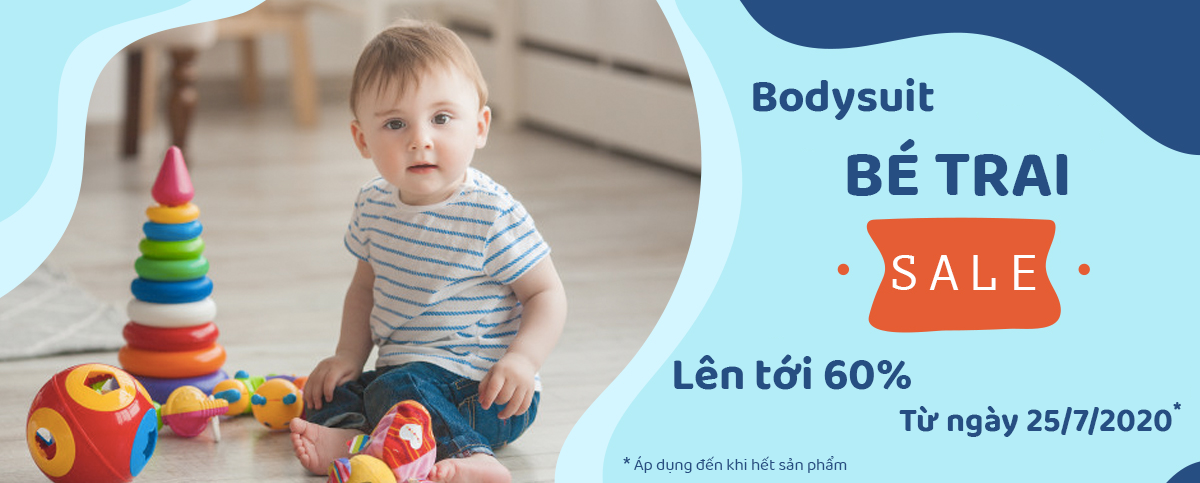
<style>
.page{position:relative;width:1200px;height:483px;background:#b4edf8}
.page>*{position:absolute;margin:0}
.t1{font:45.8px "BalooTammudu2-Bold";color:#264e82}
.t2{font:66.7px "BalooTammudu2-Bold";color:#264e82}
.t3{font:33.3px "BalooTammudu2-Bold";color:#264e82}
.t4{font:25px "BalooTammudu2-Bold";color:#264e82}
.t5{font:25px "BalooTammudu2-Regular";color:#264e82}
.t6{font:16.7px "BalooTammudu2-Regular";color:#264e82}
</style>
<div class="page">
<p class="t1" style="left:753px;top:78px;width:181px;height:42px">Bodysuit</p>
<p class="t2" style="left:847px;top:139px;width:221px;height:57px">BÉ TRAI</p>
<p class="t1" style="left:674px;top:354px;width:237px;height:36px">Lên tới 60%</p>
<p class="t3" style="left:899px;top:406px;width:273px;height:31px">Từ ngày 25/7/2020</p>
<p class="t4" style="left:1173px;top:402px;width:8px;height:8px">*</p>
<p class="t5" style="left:623px;top:457px;width:7px;height:7px">*</p>
<p class="t6" style="left:634px;top:456px;width:213px;height:17px">Áp dụng đến khi hết sản phẩm</p>
</div>
